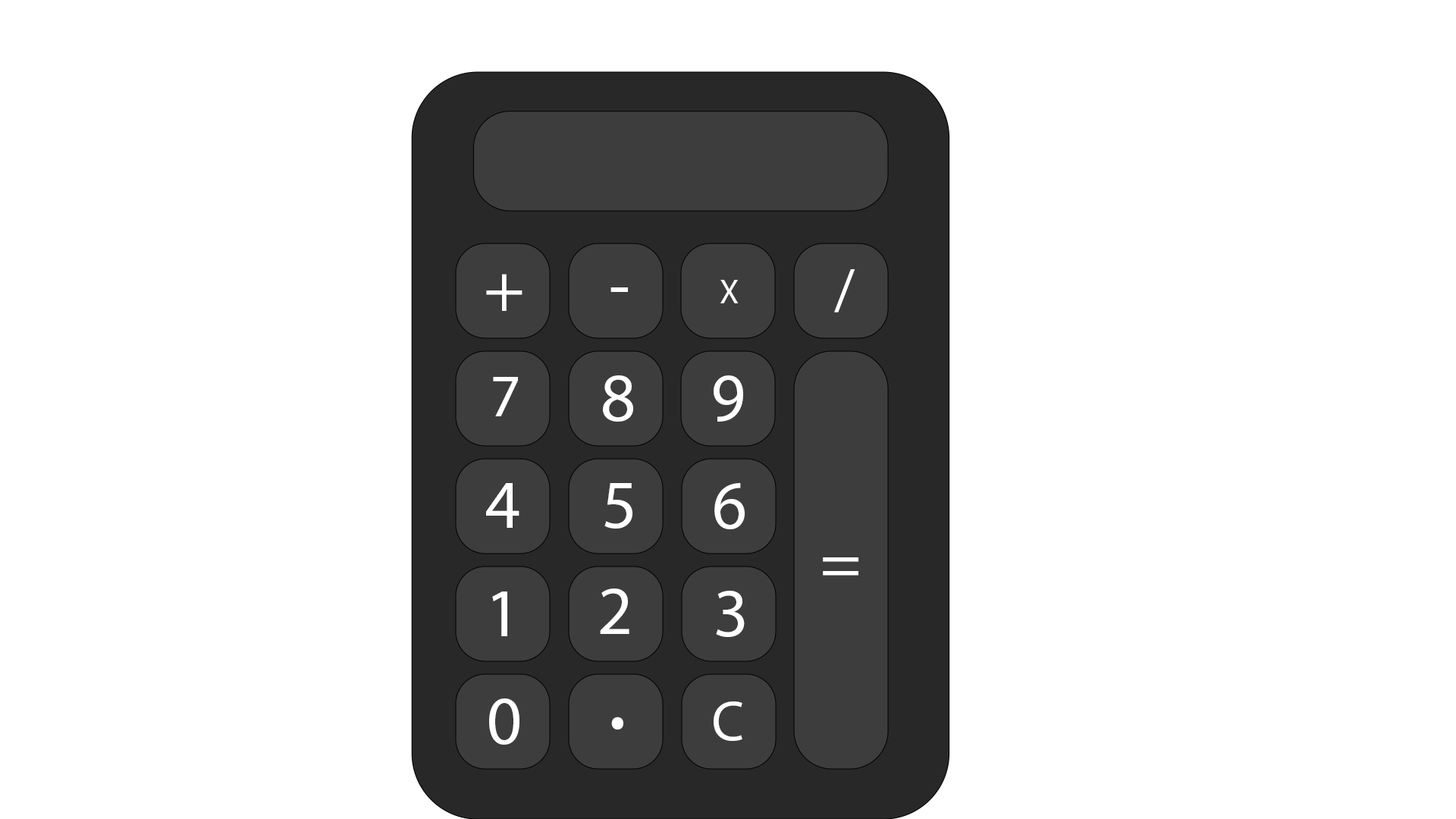
<style>
.page{position:relative;width:1456px;height:819px;background:#ffffff}
.page>*{position:absolute;margin:0}
.t1{font:59.4px "MyriadPro-Regular";letter-spacing:0.01em;color:#ffffff;text-transform:uppercase}
.t2{font:68.6px "MyriadPro-Regular";letter-spacing:0.01em;color:#ffffff;text-transform:uppercase}
.t3{font:33.9px "MyriadPro-Regular";letter-spacing:0.01em;color:#ffffff;text-transform:uppercase}
.t4{font:60.2px "MyriadPro-Regular";letter-spacing:0.01em;color:#ffffff;text-transform:uppercase}
.t5{font:55.9px "MyriadPro-Regular";letter-spacing:0.01em;color:#ffffff;text-transform:uppercase}
.t6{font:97.8px "MyriadPro-Regular";letter-spacing:0.01em;color:#ffffff;text-transform:uppercase}
</style>
<div class="page">
<p class="t1" style="left:834px;top:269px;width:21px;height:43px">/</p>
<p class="t2" style="left:486px;top:274px;width:36px;height:37px">+</p>
<p class="t3" style="left:720px;top:280px;width:19px;height:23px">x</p>
<p class="t2" style="left:610px;top:287px;width:18px;height:5px">-</p>
<p class="t4" style="left:493px;top:377px;width:25px;height:39px">7</p>
<p class="t2" style="left:603px;top:375px;width:30px;height:47px">8</p>
<p class="t2" style="left:714px;top:375px;width:29px;height:47px">9</p>
<p class="t2" style="left:486px;top:483px;width:33px;height:45px">4</p>
<p class="t2" style="left:604px;top:483px;width:28px;height:46px">5</p>
<p class="t2" style="left:714px;top:483px;width:31px;height:46px">6</p>
<p class="t2" style="left:823px;top:557px;width:35px;height:19px">=</p>
<p class="t2" style="left:492px;top:591px;width:15px;height:45px">1</p>
<p class="t2" style="left:600px;top:588px;width:29px;height:46px">2</p>
<p class="t2" style="left:716px;top:591px;width:29px;height:46px">3</p>
<p class="t2" style="left:489px;top:698px;width:30px;height:47px">0</p>
<p class="t5" style="left:714px;top:701px;width:28px;height:40px">c</p>
<p class="t6" style="left:611px;top:717px;width:12px;height:13px">.</p>
</div>
